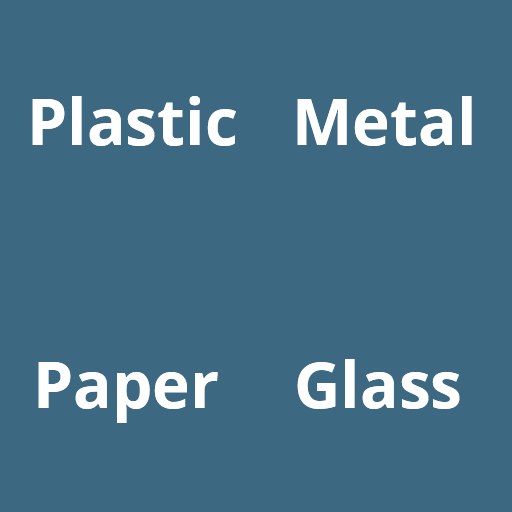
<style>
.page{position:relative;width:512px;height:512px;background:#3d6881}
.page>*{position:absolute;margin:0}
.t1{font:64px "OpenSans-Bold";color:#ffffff}
</style>
<div class="page">
<p class="t1" style="left:32px;top:96px;width:204px;height:50px">Plastic</p>
<p class="t1" style="left:297px;top:96px;width:175px;height:50px">Metal</p>
<p class="t1" style="left:38px;top:362px;width:180px;height:61px">Paper</p>
<p class="t1" style="left:297px;top:359px;width:163px;height:50px">Glass</p>
</div>
